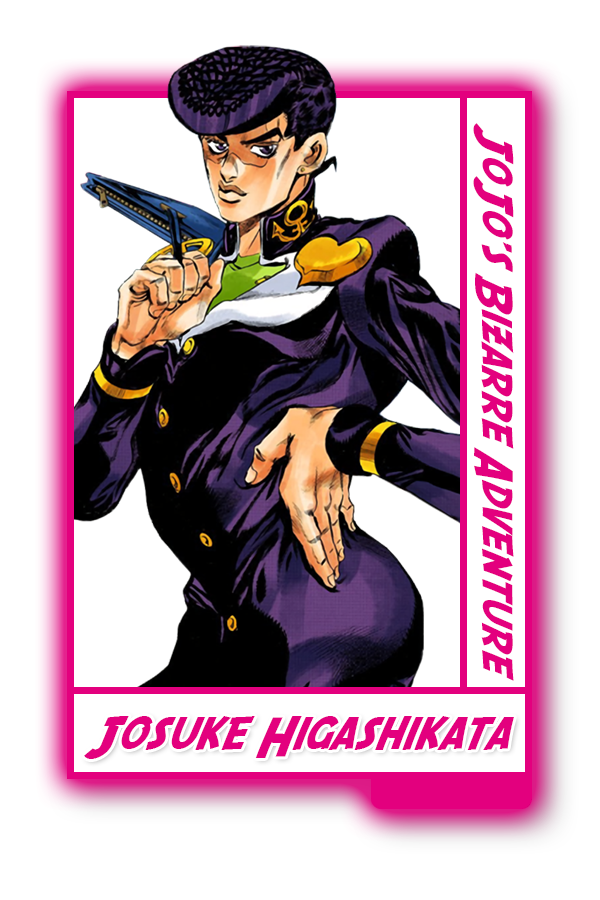
<style>
.page{position:relative;width:600px;height:900px;background:#ffffff}
.page>*{position:absolute;margin:0}
.t1{font:42.4px "SFFedora";color:#e3007e}
.t2{font:45.6px "SFFedora";color:#e3007e}
</style>
<div class="page">
<p class="t1" style="left:473px;top:123px;width:41px;height:558px;rotate:90deg">JoJo's Bizarre Adventure</p>
<p class="t2" style="left:84px;top:716px;width:430px;height:43px">Josuke Higashikata</p>
</div>
